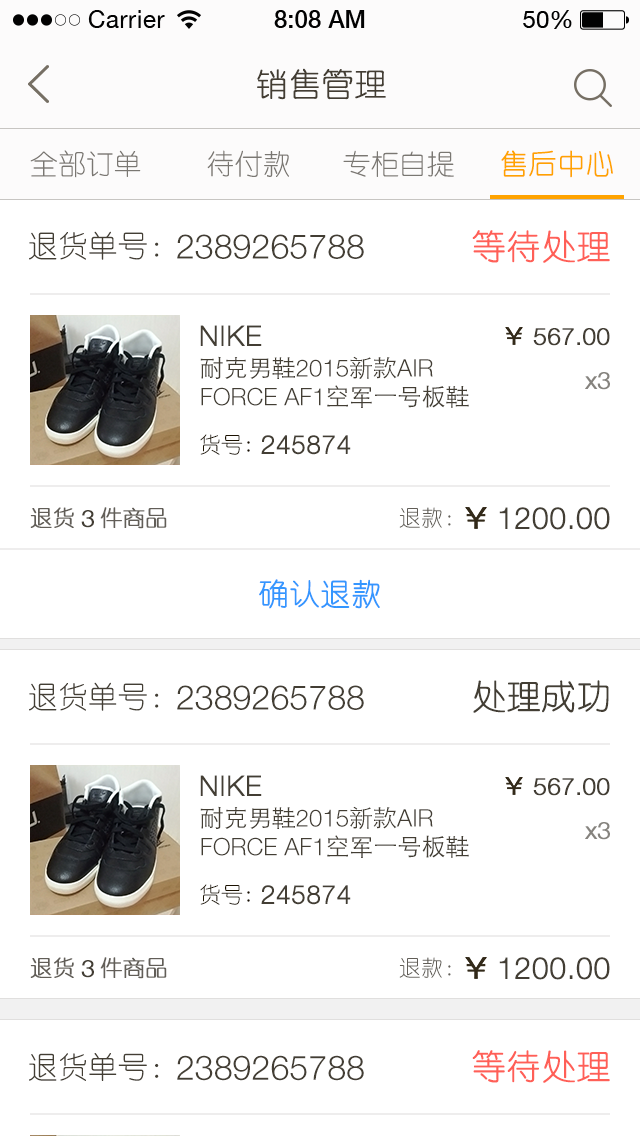
<style>
.page{position:relative;width:640px;height:1136px;background:#ffffff}
.page>*{position:absolute;margin:0}
.t1{font:32px "YouYuan";color:#433d33;text-transform:uppercase;font-weight:bold}
.t2{font:28px "YouYuan";color:#7a7772;text-transform:uppercase}
.t3{font:28px "YouYuan";color:#ffa300;text-transform:uppercase;font-weight:bold}
.t4{font:30px "YouYuan";color:#433e34;text-transform:uppercase}
.t5{font:34px "YouYuan";color:#ff5f57;text-transform:uppercase;font-weight:bold}
.t6{font:34px "HelveticaNeueLTPro-Lt";color:#433e34;text-transform:uppercase}
.t7{font:28px "HelveticaNeueLTPro-Lt";color:#433e34;text-transform:uppercase;font-weight:bold}
.t8{font:24px "HelveticaNeueLTPro-Lt";color:#433e34;text-transform:uppercase;font-weight:bold}
.t9{font:24px "HelveticaNeueLTPro-Lt";color:#433e34;text-transform:uppercase}
.t10{font:24px "STHeitiSC-Light";color:#433e34;text-transform:uppercase}
.t11{font:24px "HelveticaNeueLTPro-Lt";color:#86837e;font-weight:bold}
.t12{font:22px "YouYuan";color:#1b1100;text-transform:uppercase}
.t13{font:26px "HelveticaNeueLTPro-Lt";color:#433e34;text-transform:uppercase;font-weight:bold}
.t14{font:22px "YouYuan";color:#625e58;text-transform:uppercase;font-weight:bold}
.t15{font:22px "YouYuan";color:#625e58;text-transform:uppercase}
.t16{font:30px "HelveticaNeueLTPro-Lt";color:#433e34;text-transform:uppercase;font-weight:bold}
.t17{font:30px "YouYuan";color:#3496ff;text-transform:uppercase;font-weight:bold}
.t18{font:34px "YouYuan";color:#433e34;text-transform:uppercase;font-weight:bold}
</style>
<div class="page">
<p class="t1" style="left:257px;top:68px;width:129px;height:32px">销售管理</p>
<p class="t2" style="left:30px;top:150px;width:111px;height:28px">全部订单</p>
<p class="t2" style="left:207px;top:150px;width:82px;height:27px">待付款</p>
<p class="t2" style="left:343px;top:150px;width:111px;height:27px">专柜自提</p>
<p class="t3" style="left:501px;top:150px;width:112px;height:28px">售后中心</p>
<p class="t4" style="left:29px;top:231px;width:130px;height:29px">退货单号：</p>
<p class="t5" style="left:472px;top:230px;width:138px;height:33px">等待处理</p>
<p class="t6" style="left:177px;top:234px;width:187px;height:25px">2389265788</p>
<p class="t7" style="left:200px;top:325px;width:62px;height:21px">NIKE</p>
<p class="t8" style="left:533px;top:328px;width:77px;height:18px">567.00</p>
<p class="t9" style="left:200px;top:356px;width:269px;height:52px"><span class="t10">耐克男鞋</span>2015<span class="t10">新款</span>air force AF1<span class="t10">空军一号板鞋</span></p>
<p class="t11" style="left:585px;top:372px;width:25px;height:18px">x3</p>
<p class="t12" style="left:200px;top:434px;width:50px;height:21px">货号:</p>
<p class="t13" style="left:261px;top:435px;width:90px;height:20px">245874</p>
<p class="t14" style="left:30px;top:507px;width:44px;height:21px">退货</p>
<p class="t8" style="left:81px;top:510px;width:13px;height:18px">3</p>
<p class="t14" style="left:100px;top:507px;width:67px;height:22px">件商品</p>
<p class="t15" style="left:399px;top:507px;width:52px;height:21px">退款：</p>
<p class="t16" style="left:499px;top:507px;width:111px;height:23px">1200.00</p>
<p class="t17" style="left:259px;top:579px;width:121px;height:30px">确认退款</p>
<p class="t4" style="left:29px;top:682px;width:130px;height:29px">退货单号：</p>
<p class="t6" style="left:177px;top:685px;width:187px;height:25px">2389265788</p>
<p class="t18" style="left:473px;top:680px;width:136px;height:33px">处理成功</p>
<p class="t7" style="left:200px;top:775px;width:62px;height:21px">NIKE</p>
<p class="t8" style="left:533px;top:778px;width:77px;height:18px">567.00</p>
<p class="t9" style="left:200px;top:806px;width:269px;height:52px"><span class="t10">耐克男鞋</span>2015<span class="t10">新款</span>air force AF1<span class="t10">空军一号板鞋</span></p>
<p class="t11" style="left:585px;top:822px;width:25px;height:18px">x3</p>
<p class="t12" style="left:200px;top:884px;width:50px;height:21px">货号:</p>
<p class="t13" style="left:261px;top:885px;width:90px;height:20px">245874</p>
<p class="t14" style="left:30px;top:957px;width:44px;height:21px">退货</p>
<p class="t8" style="left:81px;top:960px;width:13px;height:18px">3</p>
<p class="t14" style="left:100px;top:957px;width:67px;height:22px">件商品</p>
<p class="t15" style="left:399px;top:957px;width:52px;height:21px">退款：</p>
<p class="t16" style="left:499px;top:957px;width:111px;height:23px">1200.00</p>
<p class="t4" style="left:29px;top:1053px;width:130px;height:28px">退货单号：</p>
<p class="t6" style="left:177px;top:1055px;width:187px;height:26px">2389265788</p>
<p class="t5" style="left:472px;top:1050px;width:138px;height:33px">等待处理</p>
</div>
